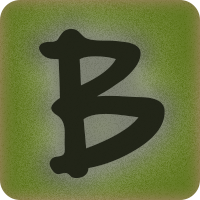
<style>
.page{position:relative;width:200px;height:200px}
.page>*{position:absolute;margin:0}
.t1{font:150px "HandOfSeanDemo";color:#222518}
</style>
<div class="page">
<p class="t1" style="left:39px;top:28px;width:126px;height:150px">B</p>
</div>
